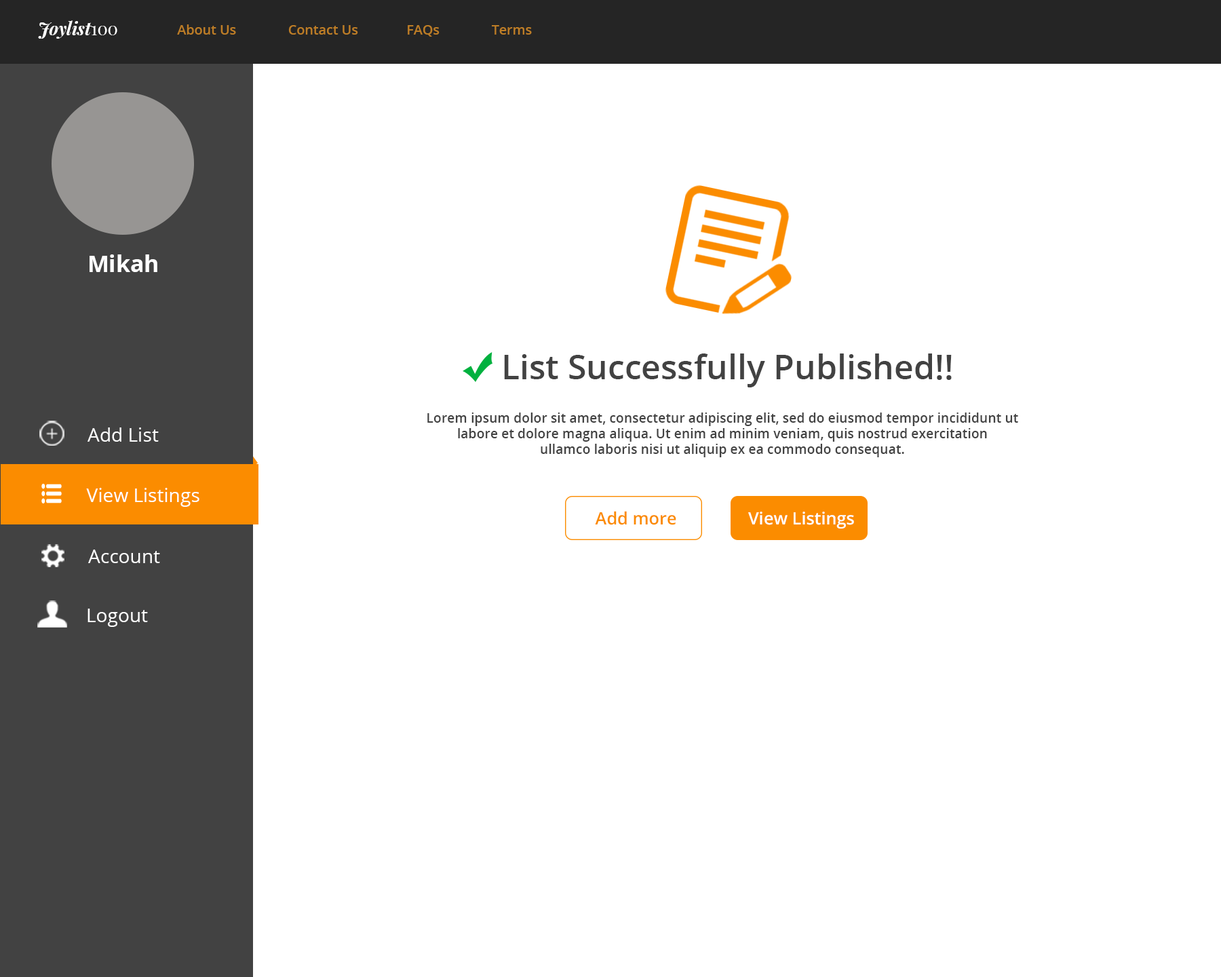
<style>
.page{position:relative;width:1221px;height:977px;background:#ffffff}
.page>*{position:absolute;margin:0}
.t1{font:17.5px "PlayfairDisplay-BoldItalic";color:#ffffff}
.t2{font:17.5px "PlayfairDisplay-Regular";color:#ffffff}
.t3{font:13.4px "OpenSans-Semibold";color:#bd7d26}
.t4{font:22.9px "OpenSans-Bold";color:#ffffff}
.t5{font:33.9px "OpenSans-Semibold";color:#424242}
.t6{font:13.2px "OpenSans-Semibold";color:#424242}
.t7{font:19.1px "OpenSans";color:#ffffff}
.t8{font:17.1px "OpenSans-Semibold";color:#fb8c00}
.t9{font:17.1px "OpenSans-Semibold";color:#ffffff}
</style>
<div class="page">
<p class="t1" style="left:38px;top:20px;width:79px;height:19px;text-align:justify">Joylist<span class="t2">100<br></span>t<span class="t2">100</span></p>
<p class="t3" style="left:177px;top:24px;width:355px;height:13px">About Us               Contact Us              FAQs               Terms</p>
<p class="t4" style="left:90px;top:254px;width:67px;height:18px">Mikah</p>
<p class="t5" style="left:504px;top:353px;width:448px;height:34px">List Successfully Published!!</p>
<p class="t6" style="left:427px;top:412px;width:591px;height:45px;text-align:justify">Lorem ipsum dolor sit amet, consectetur adipiscing elit, sed do eiusmod tempor incididunt ut <br>labore et dolore magna aliqua. Ut enim ad minim veniam, quis nostrud exercitation <br>ullamco laboris nisi ut aliquip ex ea commodo consequat.</p>
<p class="t7" style="left:87px;top:427px;width:72px;height:15px">Add List</p>
<p class="t7" style="left:86px;top:488px;width:113px;height:19px">View Listings</p>
<p class="t8" style="left:595px;top:511px;width:81px;height:14px">Add more</p>
<p class="t9" style="left:748px;top:511px;width:106px;height:17px">View Listings</p>
<p class="t7" style="left:88px;top:549px;width:72px;height:14px">Account</p>
<p class="t7" style="left:87px;top:608px;width:61px;height:19px">Logout</p>
</div>
